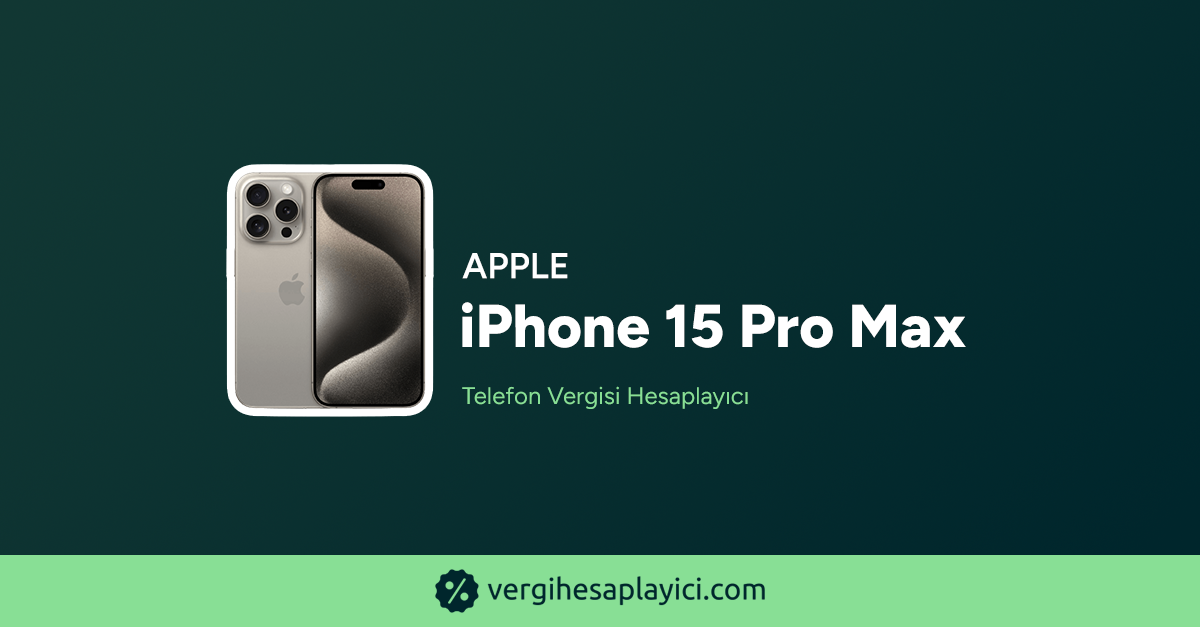
<style>
.page{position:relative;width:1200px;height:627px}
.page>*{position:absolute;margin:0}
.t1{font:36px "Figtree-SemiBold";color:#ffffff;text-transform:uppercase;font-weight:bold}
.t2{font:60.3px "Figtree-ExtraBold";color:#ffffff;font-weight:bold}
.t3{font:24px "Figtree-Regular";color:#88df95;font-weight:bold}
</style>
<div class="page">
<p class="t1" style="left:462px;top:253px;width:106px;height:26px">Apple</p>
<p class="t2" style="left:462px;top:302px;width:504px;height:46px">iPhone 15 Pro Max</p>
<p class="t3" style="left:462px;top:386px;width:286px;height:23px">Telefon Vergisi Hesaplayıcı</p>
</div>
